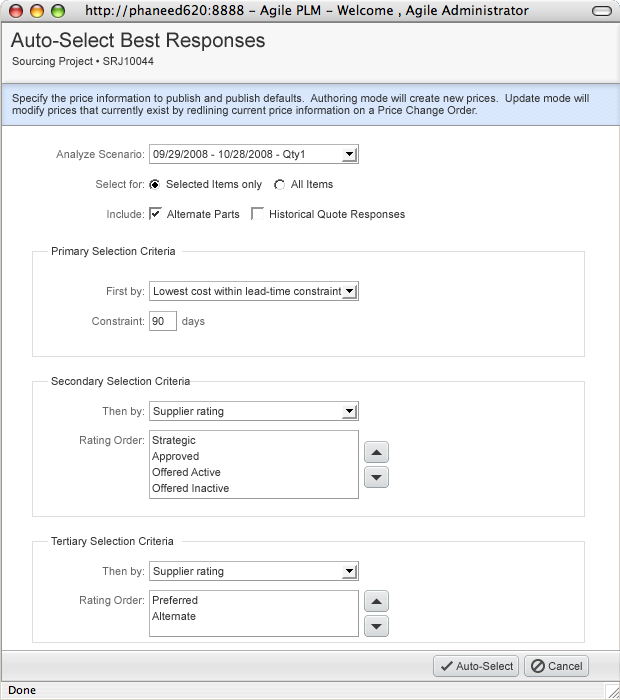
<style>
.page{position:relative;width:620px;height:700px;background:#ffffff}
.page>*{position:absolute;margin:0}
.t1{font:20px "ArialMT";color:#333333}
.t2{font:11px "ArialMT";color:#333333}
.t3{font:11px/12px "ArialMT";color:#333333}
.t4{font:11px "ArialMT";color:#666666}
.t5{font:11px/16px "ArialMT";color:#333333}
</style>
<div class="page">
<p class="t1" style="left:10px;top:32px;width:255px;height:19px">Auto-Select Best Responses</p>
<p class="t2" style="left:12px;top:57px;width:142px;height:11px">Sourcing Project • SRJ10044</p>
<p class="t3" style="left:12px;top:94px;width:577px;height:23px">Specify the price information to publish and publish defaults.  Authoring mode will create new prices.  Update mode will<br>modify prices that currently exist by redlining current price information on a Price Change Order.</p>
<p class="t4" style="left:56px;top:150px;width:88px;height:11px">Analyze Scenario:</p>
<p class="t2" style="left:153px;top:150px;width:151px;height:11px">09/29/2008 - 10/28/2008 - Qty1</p>
<p class="t4" style="left:96px;top:180px;width:48px;height:8px">Select for:</p>
<p class="t2" style="left:166px;top:180px;width:96px;height:11px">Selected Items only</p>
<p class="t2" style="left:291px;top:180px;width:42px;height:8px">All Items</p>
<p class="t4" style="left:107px;top:210px;width:37px;height:8px">Include:</p>
<p class="t2" style="left:167px;top:210px;width:73px;height:8px">Alternate Parts</p>
<p class="t2" style="left:270px;top:210px;width:135px;height:11px">Historical Quote Responses</p>
<p class="t2" style="left:52px;top:247px;width:123px;height:11px">Primary Selection Criteria</p>
<p class="t4" style="left:107px;top:287px;width:37px;height:11px">First by:</p>
<p class="t2" style="left:154px;top:287px;width:188px;height:8px">Lowest cost within lead-time constraint</p>
<p class="t4" style="left:92px;top:317px;width:52px;height:8px">Constraint:</p>
<p class="t2" style="left:152px;top:317px;width:12px;height:8px">90</p>
<p class="t4" style="left:182px;top:317px;width:23px;height:11px">days</p>
<p class="t2" style="left:51px;top:377px;width:139px;height:11px">Secondary Selection Criteria</p>
<p class="t4" style="left:102px;top:407px;width:42px;height:11px">Then by:</p>
<p class="t2" style="left:153px;top:407px;width:71px;height:11px">Supplier rating</p>
<p class="t4" style="left:80px;top:436px;width:64px;height:11px">Rating Order:</p>
<p class="t5" style="left:152px;top:436px;width:77px;height:56px">Strategic<br>Approved<br>Offered Active<br>Offered Inactive</p>
<p class="t2" style="left:51px;top:537px;width:123px;height:11px">Tertiary Selection Criteria</p>
<p class="t4" style="left:102px;top:567px;width:42px;height:11px">Then by:</p>
<p class="t2" style="left:153px;top:567px;width:71px;height:11px">Supplier rating</p>
<p class="t4" style="left:80px;top:596px;width:64px;height:11px">Rating Order:</p>
<p class="t5" style="left:152px;top:596px;width:46px;height:24px">Preferred<br>Alternate</p>
<p class="t2" style="left:456px;top:662px;width:57px;height:8px">Auto-Select</p>
<p class="t2" style="left:548px;top:662px;width:34px;height:8px">Cancel</p>
</div>
